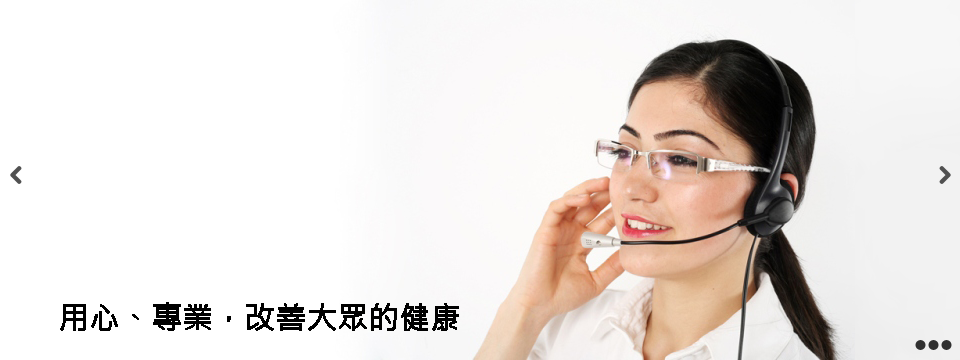
<style>
.page{position:relative;width:960px;height:360px;background:#ffffff}
.page>*{position:absolute;margin:0}
.t1{font:30px "MicrosoftJhengHeiRegular";color:#000000;font-weight:bold}
</style>
<div class="page">
<p class="t1" style="left:60px;top:302px;width:399px;height:29px">用心、專業，改善大眾的健康</p>
</div>
